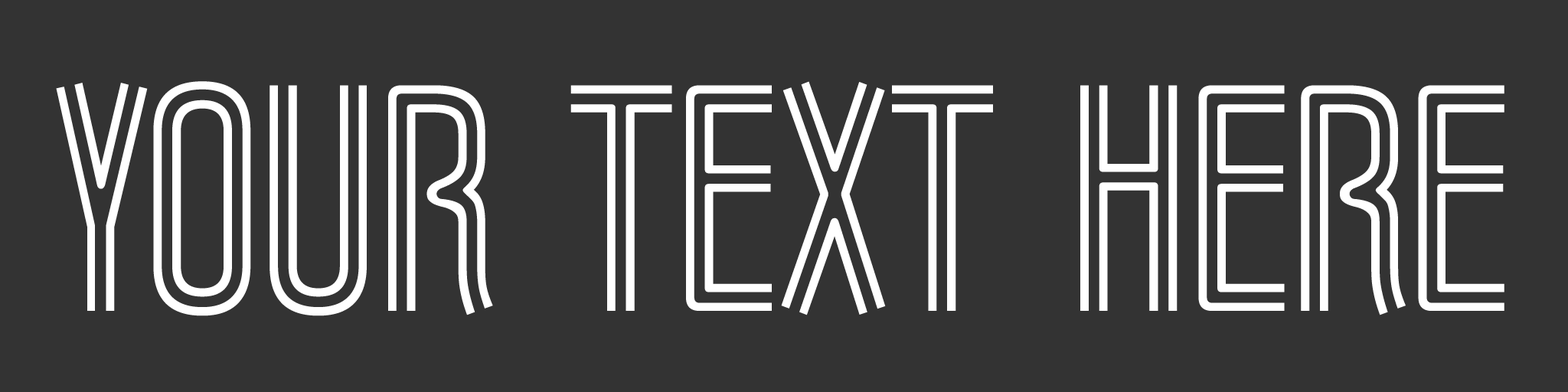
<style>
.page{position:relative;width:1568px;height:392px;background:#333333}
.page>*{position:absolute;margin:0}
.t1{font:280.7px "MarqueeMoon-Regular";color:#ffffff}
</style>
<div class="page">
<p class="t1" style="left:56px;top:81px;width:1448px;height:235px">your text here</p>
</div>
